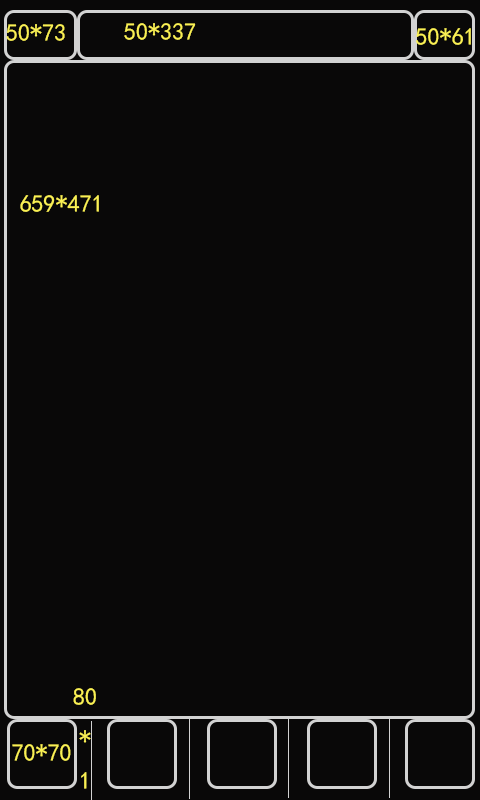
<style>
.page{position:relative;width:480px;height:800px;background:#090808}
.page>*{position:absolute;margin:0}
.t1{font:24px "SimHei";color:#faf054}
</style>
<div class="page">
<p class="t1" style="left:6px;top:24px;width:59px;height:17px">50*73</p>
<p class="t1" style="left:124px;top:23px;width:72px;height:17px">50*337</p>
<p class="t1" style="left:416px;top:28px;width:55px;height:17px">50*61</p>
<p class="t1" style="left:20px;top:195px;width:79px;height:17px">659*471</p>
<p class="t1" style="left:73px;top:688px;width:23px;height:101px;text-align:center">80<br>*<br>1</p>
<p class="t1" style="left:12px;top:744px;width:59px;height:17px">70*70</p>
</div>
